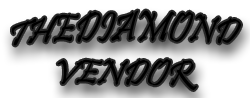
<style>
.page{position:relative;width:250px;height:98px;background:#ffffff}
.page>*{position:absolute;margin:0}
.t1{font:34px "Pristina-Regular";color:#000000;font-style:italic}
</style>
<div class="page">
<p class="t1" style="left:12px;top:10px;width:229px;height:80px;text-align:center">THEDIAMOND<br>VENDOR</p>
</div>
